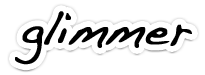
<style>
.page{position:relative;width:205px;height:75px;background:#ffffff}
.page>*{position:absolute;margin:0}
.t1{font:47px "Handwriting-Dakota";letter-spacing:-0.06em;color:#000000;font-weight:bold}
.t2{font:47px "Handwriting-Dakota";color:#000000;font-weight:bold}
</style>
<div class="page">
<p class="t1" style="left:15px;top:11px;width:177px;height:54px"><span class="t2">g</span>lim<span class="t2">mer</span></p>
</div>
